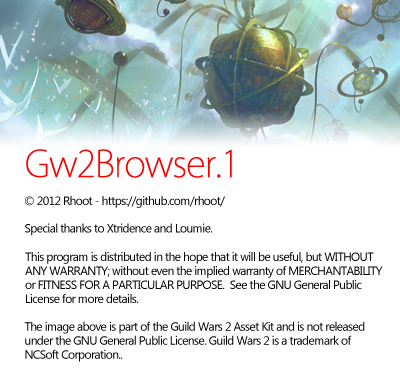
<style>
.page{position:relative;width:400px;height:384px;background:#ffffff}
.page>*{position:absolute;margin:0}
.t1{font:36px "KozGoPr6N-ExtraLight";letter-spacing:-0.05em;color:#ff0000;font-weight:bold}
.t2{font:12px "SegoeUI";letter-spacing:-0.05em;color:#000000}
.t3{font:12px/14px "SegoeUI";letter-spacing:-0.05em;color:#000000}
</style>
<div class="page">
<p class="t1" style="left:26px;top:149px;width:206px;height:29px">Gw2Browser.1</p>
<p class="t2" style="left:25px;top:196px;width:200px;height:12px">© 2012 Rhoot - https://github.com/rhoot/</p>
<p class="t2" style="left:25px;top:223px;width:188px;height:13px">Special thanks to Xtridence and Loumie.</p>
<p class="t3" style="left:25px;top:252px;width:358px;height:51px">This program is distributed in the hope that it will be useful, but WITHOUT <br>ANY WARRANTY; without even the implied warranty of MERCHANTABILITY <br>or FITNESS FOR A PARTICULAR PURPOSE.  See the GNU General Public <br>License for more details.</p>
<p class="t3" style="left:24px;top:321px;width:341px;height:41px">The image above is part of the Guild Wars 2 Asset Kit and is not released<br>under the GNU General Public License. Guild Wars 2 is a trademark of<br>NCSoft Corporation..</p>
</div>
